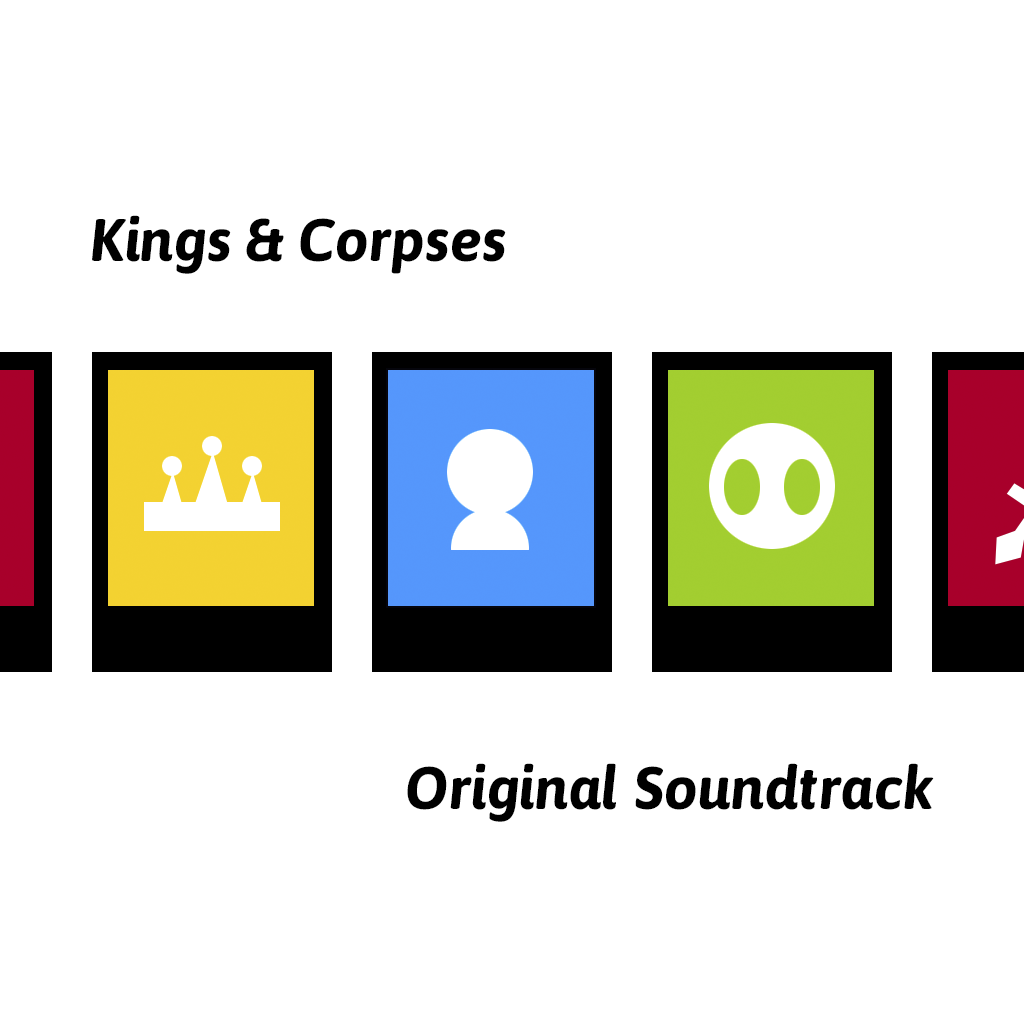
<style>
.page{position:relative;width:1024px;height:1024px;background:#ffffff}
.page>*{position:absolute;margin:0}
.t1{font:60px "Asap-BoldItalic";color:#000000}
</style>
<div class="page">
<p class="t1" style="left:92px;top:215px;width:414px;height:59px">Kings &amp; Corpses</p>
<p class="t1" style="left:407px;top:763px;width:527px;height:59px">Original Soundtrack</p>
</div>
